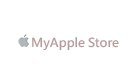
<style>
.page{position:relative;width:140px;height:79px;background:#ffffff}
.page>*{position:absolute;margin:0}
.t1{font:12.3px "MicrosoftJhengHeiUIBold";color:#b79c9c}
</style>
<div class="page">
<p class="t1" style="left:32px;top:37px;width:87px;height:14px">MyApple Store</p>
</div>
